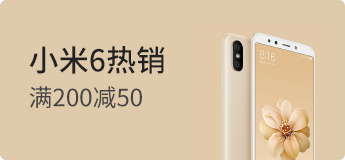
<style>
.page{position:relative;width:345px;height:160px;background:#dfcaab}
.page>*{position:absolute;margin:0}
.t1{font:30px "SourceHanSansCN-Medium";color:#222222}
.t2{font:24px "SourceHanSansCN-Regular";color:#444444}
</style>
<div class="page">
<p class="t1" style="left:29px;top:46px;width:136px;height:28px">小米6热销</p>
<p class="t2" style="left:29px;top:86px;width:113px;height:23px">满200减50</p>
</div>
